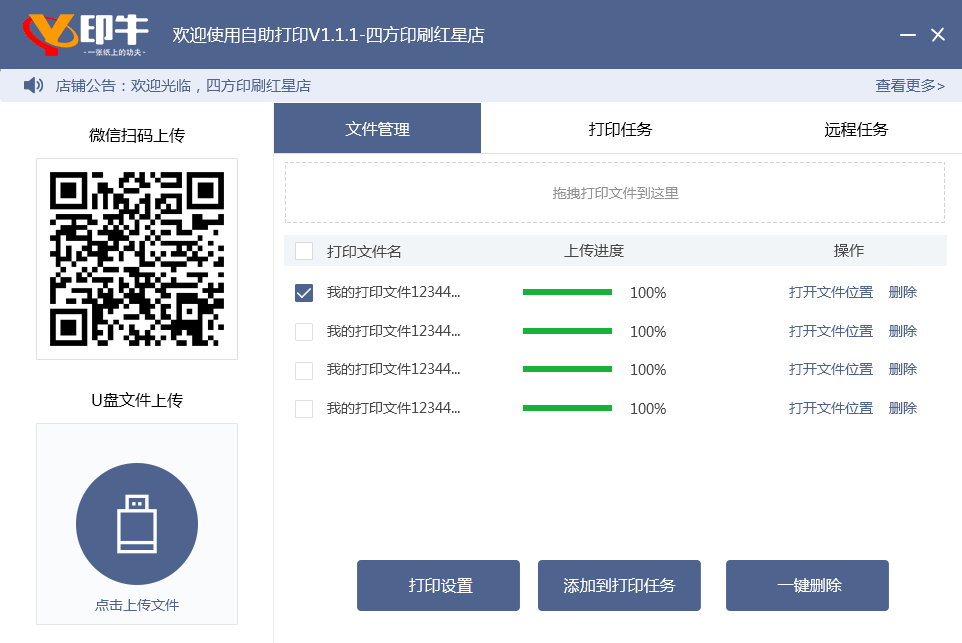
<style>
.page{position:relative;width:962px;height:643px;background:#ffffff}
.page>*{position:absolute;margin:0}
.t1{font:17px "MicrosoftYaHei";color:#ffffff}
.t2{font:15px "MicrosoftYaHei";color:#4f638f}
.t3{font:16px "MicrosoftYaHei";color:#ffffff}
.t4{font:16px "MicrosoftYaHei";color:#000000}
.t5{font:14px "MicrosoftYaHei";color:#929292}
.t6{font:15px "MicrosoftYaHei";color:#474747}
.t7{font:14px "MicrosoftYaHei";color:#474747}
.t8{font:14px "MicrosoftYaHei";color:#4f638f}
</style>
<div class="page">
<p class="t1" style="left:173px;top:26px;width:312px;height:17px">欢迎使用自助打印V1.1.1-四方印刷红星店</p>
<p class="t2" style="left:56px;top:79px;width:255px;height:14px">店铺公告：欢迎光临，四方印刷红星店</p>
<p class="t2" style="left:876px;top:79px;width:69px;height:13px">查看更多&gt;</p>
<p class="t3" style="left:345px;top:121px;width:65px;height:15px">文件管理</p>
<p class="t4" style="left:589px;top:122px;width:64px;height:15px">打印任务</p>
<p class="t4" style="left:825px;top:122px;width:64px;height:15px">远程任务</p>
<p class="t4" style="left:89px;top:128px;width:96px;height:15px">微信扫码上传</p>
<p class="t5" style="left:553px;top:187px;width:126px;height:12px">拖拽打印文件到这里</p>
<p class="t6" style="left:327px;top:245px;width:74px;height:13px">打印文件名</p>
<p class="t6" style="left:564px;top:244px;width:60px;height:13px">上传进度</p>
<p class="t6" style="left:834px;top:244px;width:30px;height:13px">操作</p>
<p class="t7" style="left:327px;top:286px;width:133px;height:12px">我的打印文件12344...</p>
<p class="t7" style="left:631px;top:287px;width:35px;height:11px">100%</p>
<p class="t8" style="left:789px;top:286px;width:128px;height:12px">打开文件位置    删除</p>
<p class="t7" style="left:327px;top:325px;width:133px;height:12px">我的打印文件12344...</p>
<p class="t7" style="left:631px;top:326px;width:35px;height:11px">100%</p>
<p class="t8" style="left:789px;top:325px;width:128px;height:12px">打开文件位置    删除</p>
<p class="t7" style="left:327px;top:363px;width:133px;height:12px">我的打印文件12344...</p>
<p class="t7" style="left:631px;top:364px;width:35px;height:11px">100%</p>
<p class="t8" style="left:789px;top:363px;width:128px;height:12px">打开文件位置    删除</p>
<p class="t4" style="left:92px;top:392px;width:91px;height:16px">U盘文件上传</p>
<p class="t7" style="left:327px;top:402px;width:133px;height:12px">我的打印文件12344...</p>
<p class="t7" style="left:631px;top:403px;width:35px;height:11px">100%</p>
<p class="t8" style="left:789px;top:402px;width:128px;height:12px">打开文件位置    删除</p>
<p class="t3" style="left:409px;top:578px;width:64px;height:15px">打印设置</p>
<p class="t3" style="left:564px;top:578px;width:112px;height:15px">添加到打印任务</p>
<p class="t3" style="left:777px;top:578px;width:65px;height:15px">一键删除</p>
<p class="t8" style="left:95px;top:599px;width:84px;height:12px">点击上传文件</p>
</div>
